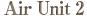
<style>
.page{position:relative;width:87px;height:19px;background:#ffffff}
.page>*{position:absolute;margin:0}
.t1{font:18px "RyuminPro-ExBold";letter-spacing:-0.04em}
</style>
<div class="page">
<p class="t1" style="left:4px;top:1px;width:80px;height:14px">Air Unit 2</p>
</div>
